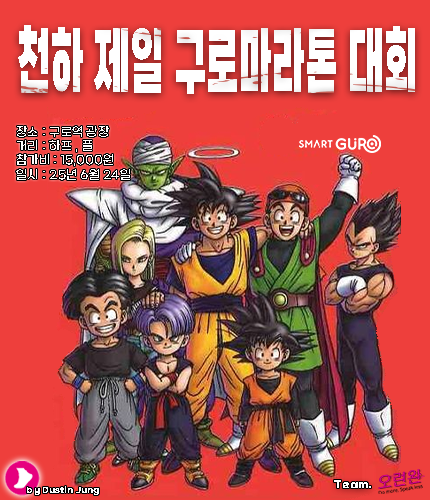
<style>
.page{position:relative;width:430px;height:500px;background:#ee3f3c}
.page>*{position:absolute;margin:0}
.t1{font:12px "SBAggroL";letter-spacing:0.02em;color:#ffffff}
.t2{font:8px "SBAggroB";letter-spacing:0.02em;color:#ffffff}
.t3{font:10px "SBAggroB";letter-spacing:0.02em;color:#ffffff}
</style>
<div class="page">
<p class="t1" style="left:16px;top:126px;width:114px;height:54px">장소 : 구로역 광장<br>거리 : 하프 , 풀<br>참가비 : 15,000원<br>일시 : 25년 6월 24일</p>
<p class="t2" style="left:27px;top:486px;width:72px;height:9px">by Dustin Jung</p>
<p class="t3" style="left:334px;top:480px;width:37px;height:8px">Team.</p>
</div>
